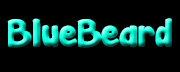
<style>
.page{position:relative;width:180px;height:72px;background:#000000}
.page>*{position:absolute;margin:0}
.t1{font:35.6px "JandaManateeSolid"}
</style>
<div class="page">
<p class="t1" style="left:7px;top:18px;width:165px;height:30px">BlueBeard</p>
</div>
